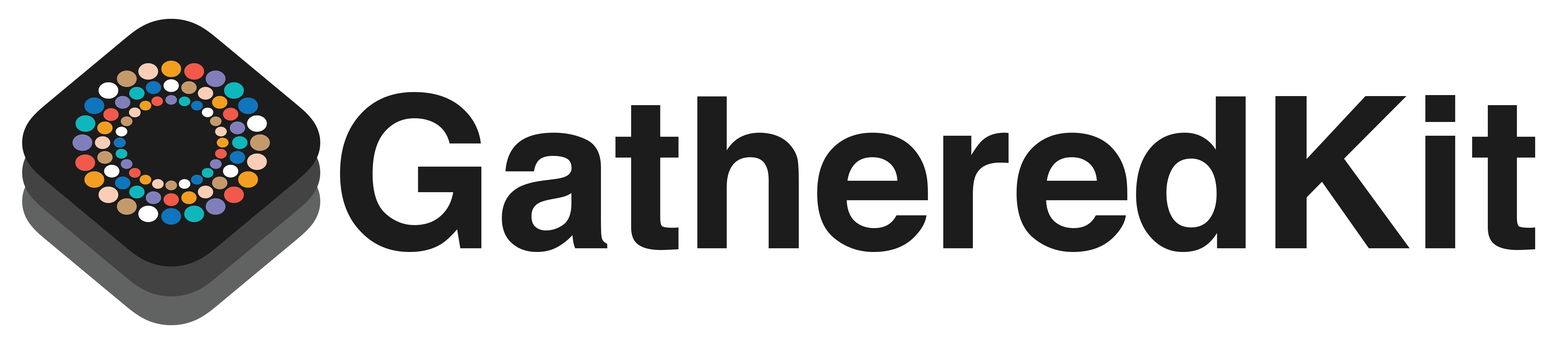
<style>
.page{position:relative;width:1568px;height:344px;background:#ffffff}
.page>*{position:absolute;margin:0}
.t1{font:211.2px "Helvetica-Bold";color:#1c1c1c}
</style>
<div class="page">
<p class="t1" style="left:340px;top:92px;width:1195px;height:160px">GatheredKit</p>
</div>
